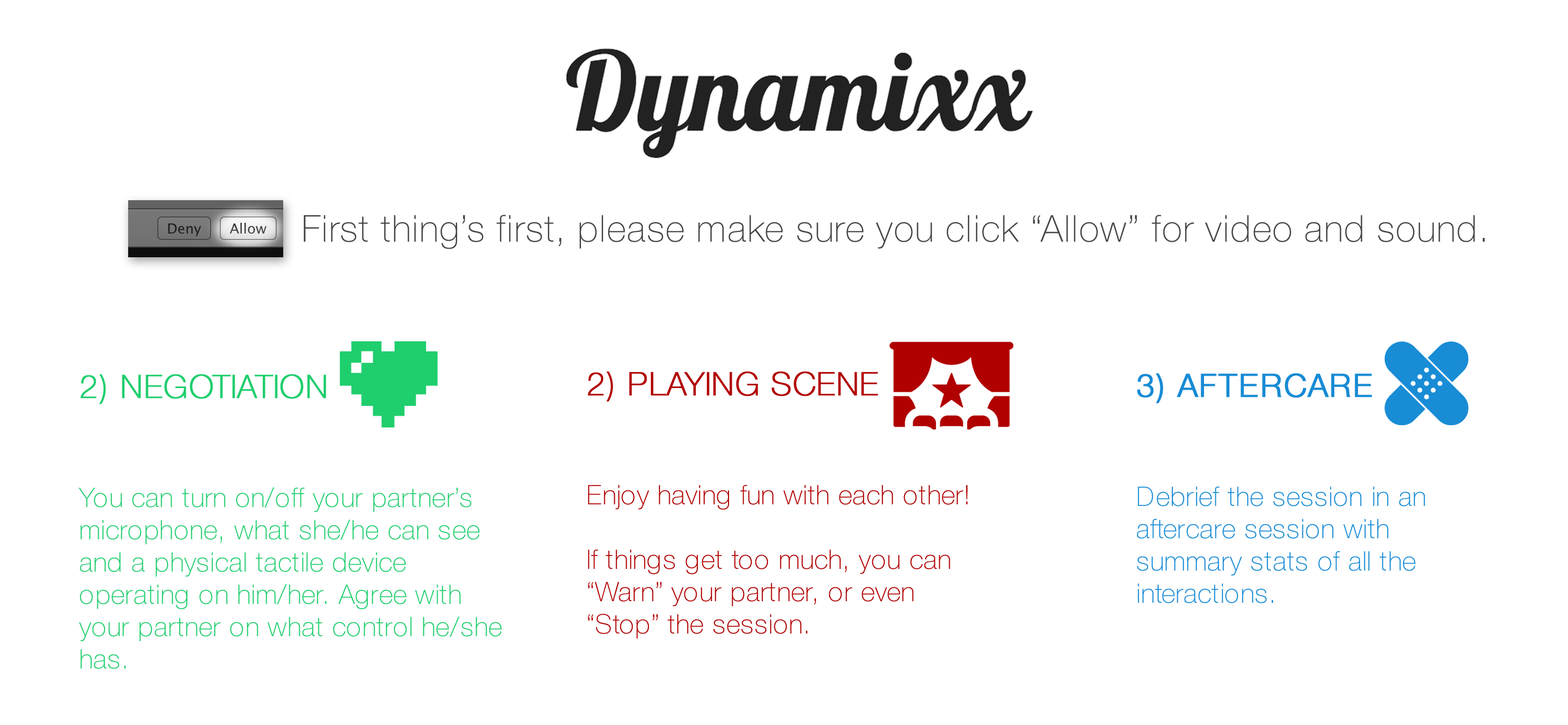
<style>
.page{position:relative;width:1568px;height:725px;background:#ffffff}
.page>*{position:absolute;margin:0}
.t1{font:37.2px "HelveticaNeue-Thin";letter-spacing:0.03em;color:#454545}
.t2{font:26.9px "HelveticaNeue-Thin";letter-spacing:0.03em;color:#1fce6d}
.t3{font:32.2px "HelveticaNeue-Thin";letter-spacing:0.03em;color:#1fce6d;font-weight:bold}
.t4{font:26.9px "HelveticaNeue-Thin";letter-spacing:0.03em;color:#b10000}
.t5{font:32.2px "HelveticaNeue-Thin";letter-spacing:0.03em;color:#b10000;font-weight:bold}
.t6{font:26.9px "HelveticaNeue-Thin";letter-spacing:0.03em;color:#178bd5}
.t7{font:32.2px "HelveticaNeue-Light";letter-spacing:0.03em;color:#178bd5;font-weight:bold}
</style>
<div class="page">
<p class="t1" style="left:304px;top:215px;width:1181px;height:34px">First thing’s first, please make sure you click “Allow” for video and sound.</p>
<p class="t2" style="left:79px;top:374px;width:423px;height:295px"><span class="t3">2) NEGOTIATION<br><br><br></span>You can turn on/off your partner’s <br>microphone, what she/he can see <br>and a physical tactile device <br>operating on him/her. Agree with <br>your partner on what control he/she <br>has.</p>
<p class="t4" style="left:587px;top:372px;width:381px;height:267px"><span class="t5">2) PLAYING SCENE<br><br><br></span>Enjoy having fun with each other!<br><br>If things get too much, you can<br>“Warn” your partner, or even<br>“Stop” the session.</p>
<p class="t6" style="left:1137px;top:373px;width:288px;height:231px"><span class="t7">3) AFTERCARE<br><br><br></span>Debrief the session in an <br>aftercare session with <br>summary stats of all the <br>interactions.</p>
</div>
